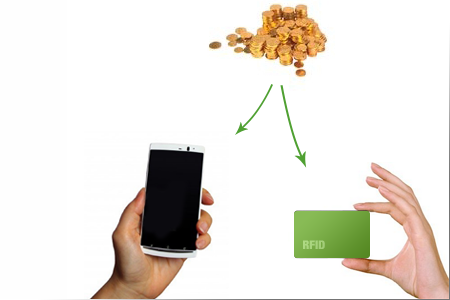
<style>
.page{position:relative;width:450px;height:300px;background:#ffffff}
.page>*{position:absolute;margin:0}
.t1{font:12px "HelveticaNeue-CondensedBlack";color:#a5dc6e}
</style>
<div class="page">
<p class="t1" style="left:303px;top:240px;width:22px;height:9px">RFID</p>
</div>
